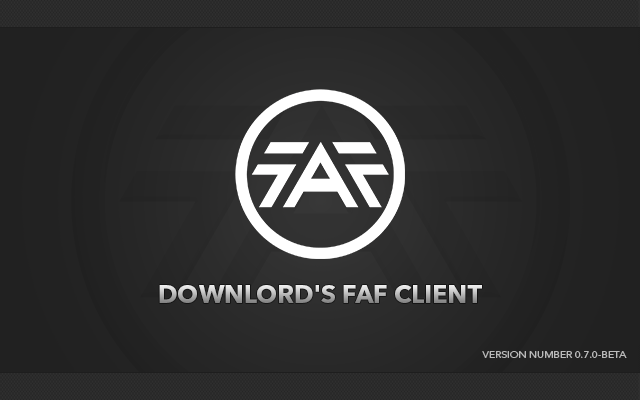
<style>
.page{position:relative;width:640px;height:400px}
.page>*{position:absolute;margin:0}
.t1{font:25px "AvenirNextLTPro-Bold";text-transform:uppercase}
.t2{font:9.2px "AvenirNextLTPro-Regular";color:#bababa;text-transform:uppercase;scale:1.12 1}
</style>
<div class="page">
<p class="t1" style="left:159px;top:285px;width:323px;height:18px">Downlord's FAF client</p>
<p class="t2" style="left:482px;top:351px;width:145px;height:7px">version number 0.7.0-beta</p>
</div>
